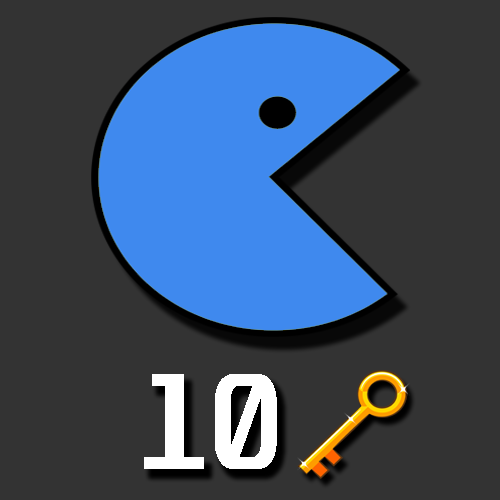
<style>
.page{position:relative;width:500px;height:500px;background:#333333}
.page>*{position:absolute;margin:0}
.t1{font:117.4px "Unispace-Bold";color:#ffffff}
</style>
<div class="page">
<p class="t1" style="left:144px;top:374px;width:133px;height:95px">10</p>
</div>
